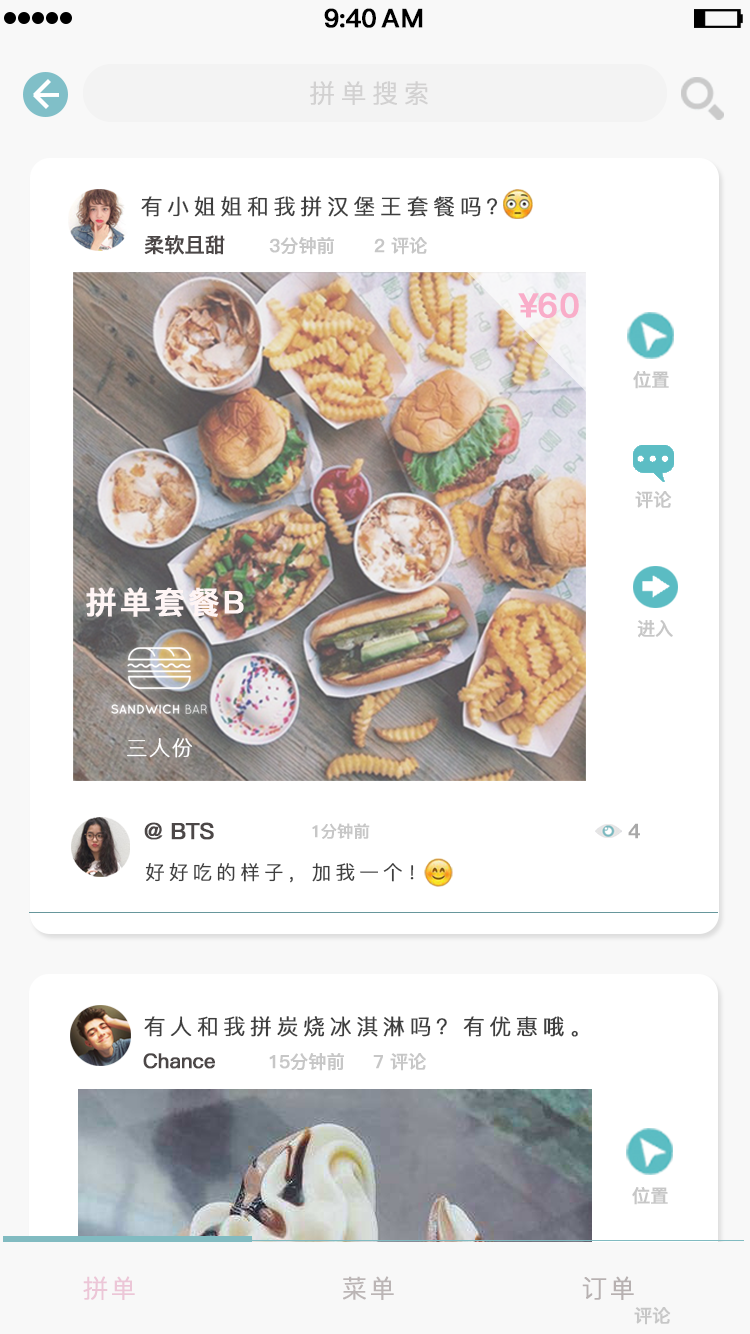
<style>
.page{position:relative;width:750px;height:1334px;background:#ffffff}
.page>*{position:absolute;margin:0}
.t1{font:25.4px "PingFang-SC-Bold";letter-spacing:-0.028em;color:#000000;font-weight:bold}
.t2{font:25.4px "PingFang-SC-Bold";letter-spacing:0.052em;color:#000000;font-weight:bold}
.t3{font:25.4px "PingFang-SC-Regular";letter-spacing:0.212em;color:#d2d1d1;font-weight:bold}
.t4{font:21.5px "PingFang-SC-Regular";letter-spacing:0.212em;color:#3e3e3e;font-weight:bold}
.t5{font:20.4px "PingFang-SC-Bold";letter-spacing:-0.028em;color:#4c4747;font-weight:bold}
.t6{font:18.3px "PingFang-SC-Bold";letter-spacing:-0.028em;color:#c7c7c7;font-weight:bold}
.t7{font:33.4px "PingFang-SC-Bold";letter-spacing:0.032em;color:#f9adc9;font-weight:bold}
.t8{font:33.4px "PingFang-SC-Bold";letter-spacing:-0.048em;color:#f9adc9;font-weight:bold}
.t9{font:30.8px "PingFang-SC-Bold";letter-spacing:0.085em;color:#fff5f5;font-weight:bold}
.t10{font:20.5px "PingFang-SC-Light";letter-spacing:0.085em;color:#ffffff;font-weight:bold}
.t11{font:22.5px "PingFang-SC-Bold";letter-spacing:-0.028em;color:#4c4747;font-weight:bold}
.t12{font:16.4px "PingFang-SC-Bold";letter-spacing:-0.028em;color:#c7c7c7;font-weight:bold}
.t13{font:20.1px "PingFang-SC-Bold";letter-spacing:0.212em;color:#a8a8a8;font-weight:bold}
.t14{font:19.3px "PingFang-SC-Regular";letter-spacing:0.212em;color:#3e3e3e;font-weight:bold}
.t15{font:25px "PingFang-SC-Regular";letter-spacing:0.085em;color:#ecc6d7;font-weight:bold}
.t16{font:25px "PingFang-SC-Regular";letter-spacing:0.085em;color:#bbb5b5;font-weight:bold}
.t17{font:25px "PingFang-SC-Regular";letter-spacing:0.085em;color:#b7b1b1;font-weight:bold}
</style>
<div class="page">
<p class="t1" style="left:324px;top:8px;width:52px;height:20px">9:40</p>
<p class="t2" style="left:381px;top:8px;width:42px;height:20px">AM</p>
<p class="t3" style="left:310px;top:81px;width:118px;height:24px">拼单搜索</p>
<p class="t4" style="left:141px;top:196px;width:357px;height:21px">有小姐姐和我拼汉堡王套餐吗？</p>
<p class="t5" style="left:144px;top:235px;width:81px;height:20px">柔软且甜</p>
<p class="t6" style="left:269px;top:237px;width:65px;height:18px">3分钟前</p>
<p class="t6" style="left:374px;top:237px;width:53px;height:18px">2 评论</p>
<p class="t7" style="left:518px;top:292px;width:61px;height:26px"><span class="t8">¥</span>60</p>
<p class="t6" style="left:633px;top:371px;width:36px;height:18px">位置</p>
<p class="t6" style="left:635px;top:491px;width:37px;height:18px">评论</p>
<p class="t9" style="left:86px;top:587px;width:158px;height:30px">拼单套餐B</p>
<p class="t6" style="left:637px;top:620px;width:36px;height:18px">进入</p>
<p class="t10" style="left:127px;top:738px;width:66px;height:20px">三人份</p>
<p class="t11" style="left:144px;top:822px;width:70px;height:18px">@ BTS</p>
<p class="t12" style="left:312px;top:823px;width:58px;height:16px">1分钟前</p>
<p class="t13" style="left:628px;top:823px;width:12px;height:16px">4</p>
<p class="t14" style="left:145px;top:862px;width:269px;height:21px">好好吃的样子，加我一个！</p>
<p class="t4" style="left:144px;top:1016px;width:434px;height:21px">有人和我拼炭烧冰淇淋吗？有优惠哦。</p>
<p class="t5" style="left:143px;top:1053px;width:72px;height:16px">Chance</p>
<p class="t6" style="left:269px;top:1053px;width:75px;height:18px">15分钟前</p>
<p class="t6" style="left:373px;top:1053px;width:53px;height:18px">7 评论</p>
<p class="t6" style="left:632px;top:1187px;width:36px;height:18px">位置</p>
<p class="t15" style="left:83px;top:1276px;width:52px;height:24px">拼单</p>
<p class="t16" style="left:343px;top:1276px;width:51px;height:24px">菜单</p>
<p class="t17" style="left:582px;top:1276px;width:52px;height:24px">订单</p>
<p class="t6" style="left:634px;top:1307px;width:37px;height:18px">评论</p>
</div>
